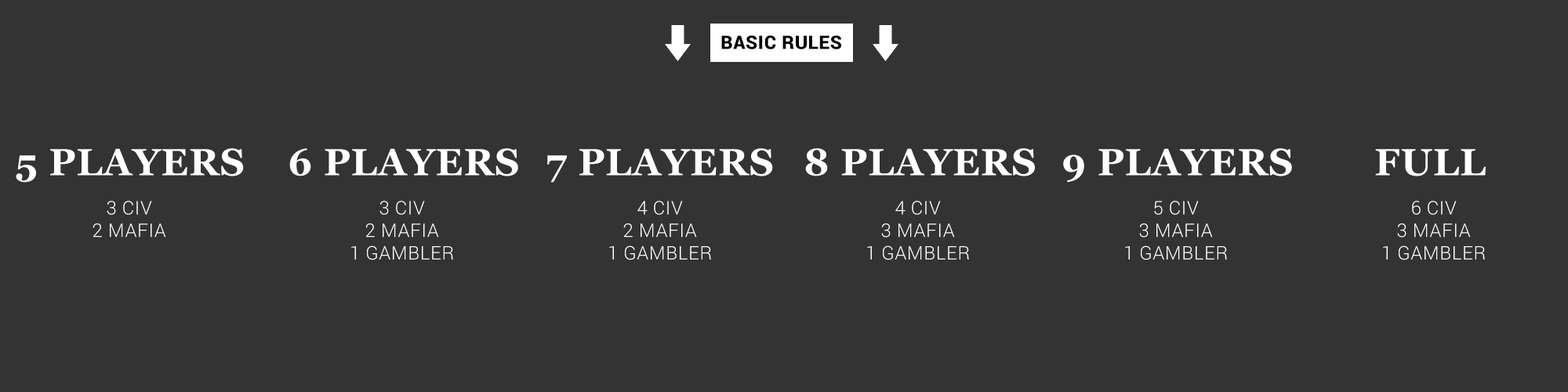
<style>
.page{position:relative;width:1568px;height:392px;background:#333333}
.page>*{position:absolute;margin:0}
.t1{font:18.8px "Roboto-Black";letter-spacing:0.025em;color:#000000}
.t2{font:37.6px "Georgia-Bold";letter-spacing:0.025em;color:#ffffff}
.t3{font:18.8px "Roboto-Light";letter-spacing:0.025em;color:#ffffff}
</style>
<div class="page">
<p class="t1" style="left:721px;top:35px;width:120px;height:14px">BASIC RULES</p>
<p class="t2" style="left:16px;top:148px;width:228px;height:35px">5 PLAYERS</p>
<p class="t2" style="left:289px;top:148px;width:229px;height:28px">6 PLAYERS</p>
<p class="t2" style="left:547px;top:148px;width:226px;height:35px">7 PLAYERS</p>
<p class="t2" style="left:805px;top:148px;width:230px;height:28px">8 PLAYERS</p>
<p class="t2" style="left:1063px;top:148px;width:229px;height:35px">9 PLAYERS</p>
<p class="t2" style="left:1375px;top:149px;width:111px;height:27px">FULL</p>
<p class="t3" style="left:93px;top:201px;width:73px;height:37px;text-align:center">3 CIV<br>2 MAFIA</p>
<p class="t3" style="left:351px;top:201px;width:102px;height:59px;text-align:center">3 CIV<br>2 MAFIA<br>1 GAMBLER</p>
<p class="t3" style="left:609px;top:201px;width:102px;height:59px;text-align:center">4 CIV<br>2 MAFIA<br>1 GAMBLER</p>
<p class="t3" style="left:867px;top:201px;width:102px;height:59px;text-align:center">4 CIV<br>3 MAFIA<br>1 GAMBLER</p>
<p class="t3" style="left:1125px;top:201px;width:102px;height:59px;text-align:center">5 CIV<br>3 MAFIA<br>1 GAMBLER</p>
<p class="t3" style="left:1383px;top:201px;width:102px;height:59px;text-align:center">6 CIV<br>3 MAFIA<br>1 GAMBLER</p>
</div>
